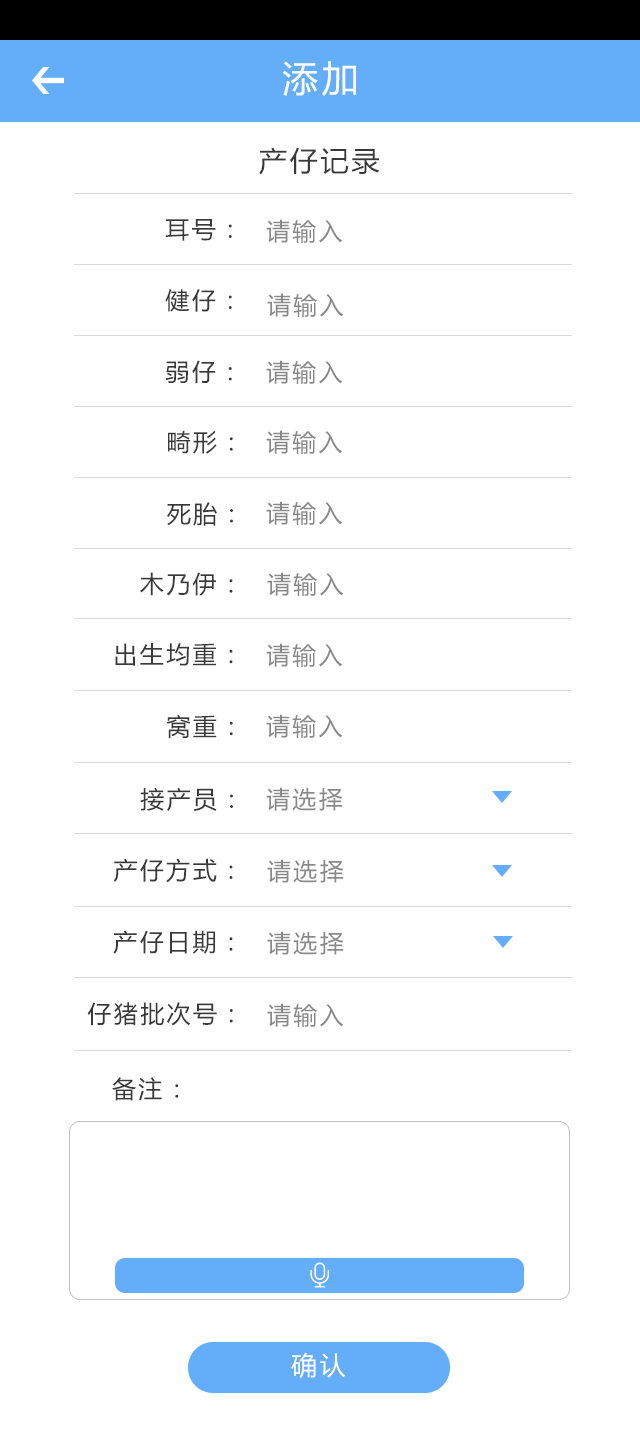
<style>
.page{position:relative;width:640px;height:1444px;background:#ffffff}
.page>*{position:absolute;margin:0}
.t1{font:36px "MicrosoftYaHei";letter-spacing:0.1em;color:#ffffff}
.t2{font:28px "MicrosoftYaHei";letter-spacing:0.1em;color:#3a3939}
.t3{font:24px "MicrosoftYaHei";letter-spacing:0.1em;color:#3a3939}
.t4{font:24px "MicrosoftYaHei";letter-spacing:0.1em;color:#898888}
.t5{font:26px "MicrosoftYaHei";letter-spacing:0.1em;color:#ffffff}
</style>
<div class="page">
<p class="t1" style="left:282px;top:61px;width:74px;height:35px">添加</p>
<p class="t2" style="left:259px;top:147px;width:121px;height:28px">产仔记录</p>
<p class="t3" style="left:165px;top:219px;width:67px;height:22px">耳号：</p>
<p class="t4" style="left:266px;top:219px;width:77px;height:24px">请输入</p>
<p class="t3" style="left:165px;top:289px;width:67px;height:23px">健仔：</p>
<p class="t4" style="left:267px;top:293px;width:77px;height:24px">请输入</p>
<p class="t3" style="left:165px;top:360px;width:67px;height:24px">弱仔：</p>
<p class="t4" style="left:266px;top:360px;width:77px;height:24px">请输入</p>
<p class="t3" style="left:168px;top:430px;width:65px;height:24px">畸形：</p>
<p class="t4" style="left:266px;top:430px;width:77px;height:24px">请输入</p>
<p class="t3" style="left:167px;top:502px;width:66px;height:24px">死胎：</p>
<p class="t4" style="left:266px;top:501px;width:77px;height:24px">请输入</p>
<p class="t3" style="left:140px;top:572px;width:93px;height:24px">木乃伊：</p>
<p class="t4" style="left:267px;top:572px;width:77px;height:24px">请输入</p>
<p class="t3" style="left:115px;top:643px;width:118px;height:23px">出生均重：</p>
<p class="t4" style="left:266px;top:643px;width:77px;height:24px">请输入</p>
<p class="t3" style="left:166px;top:714px;width:67px;height:25px">窝重：</p>
<p class="t4" style="left:266px;top:714px;width:77px;height:24px">请输入</p>
<p class="t3" style="left:140px;top:787px;width:93px;height:24px">接产员：</p>
<p class="t4" style="left:266px;top:787px;width:77px;height:24px">请选择</p>
<p class="t3" style="left:113px;top:858px;width:120px;height:25px">产仔方式：</p>
<p class="t4" style="left:267px;top:859px;width:77px;height:24px">请选择</p>
<p class="t3" style="left:113px;top:930px;width:120px;height:24px">产仔日期：</p>
<p class="t4" style="left:267px;top:931px;width:77px;height:24px">请选择</p>
<p class="t3" style="left:87px;top:1002px;width:146px;height:24px">仔猪批次号：</p>
<p class="t4" style="left:267px;top:1003px;width:77px;height:24px">请输入</p>
<p class="t3" style="left:112px;top:1077px;width:67px;height:24px">备注：</p>
<p class="t5" style="left:291px;top:1352px;width:55px;height:27px">确认</p>
</div>
